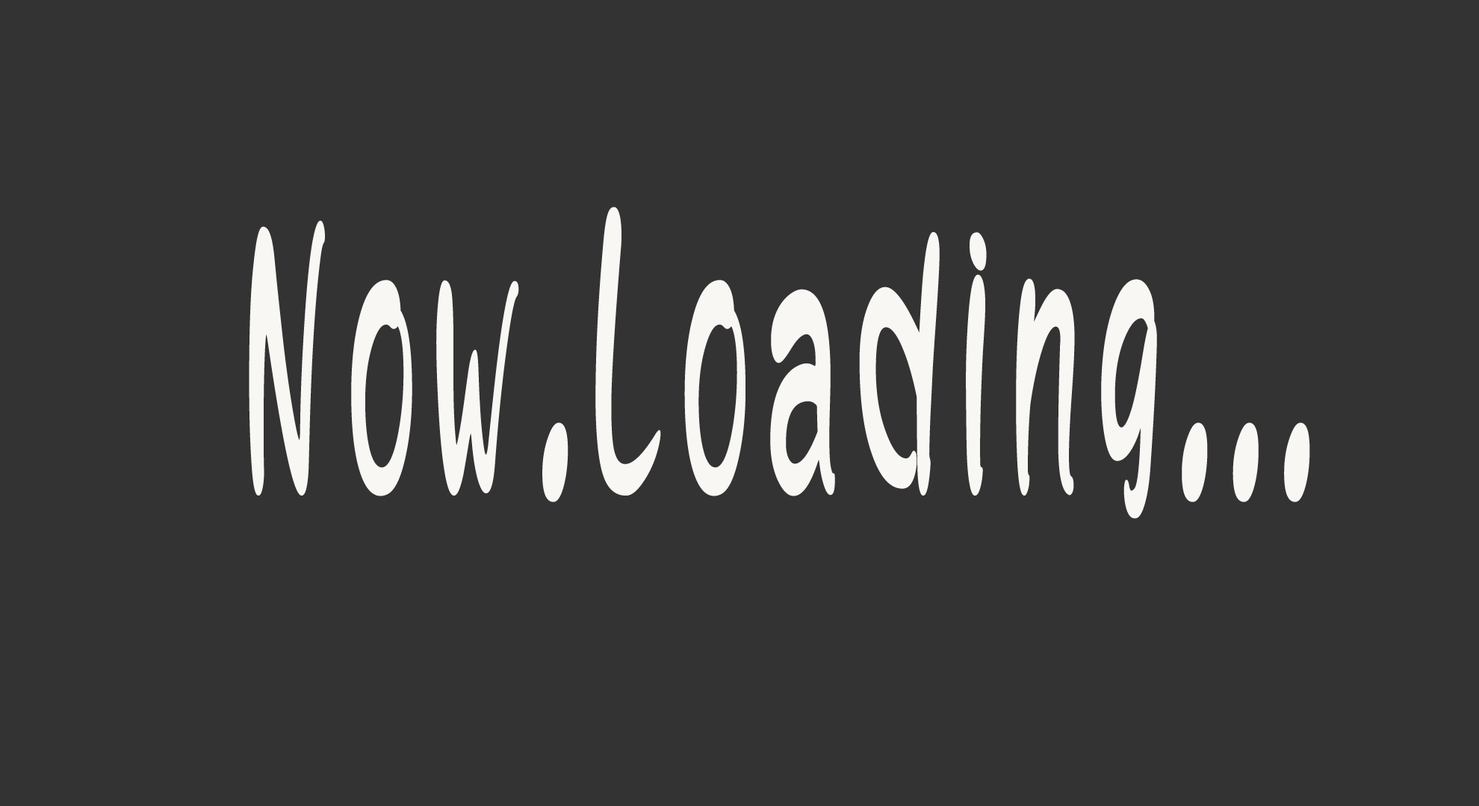
<style>
.page{position:relative;width:1479px;height:806px;background:#333333}
.page>*{position:absolute;margin:0}
.t1{font:341.6px "DFRuLei-W7-WING-RKSJ-H";letter-spacing:0.2em;color:#f9f7f4;font-weight:bold;scale:0.29 1}
</style>
<div class="page">
<p class="t1" style="left:249px;top:207px;width:1061px;height:312px">Now.Loading...</p>
</div>
